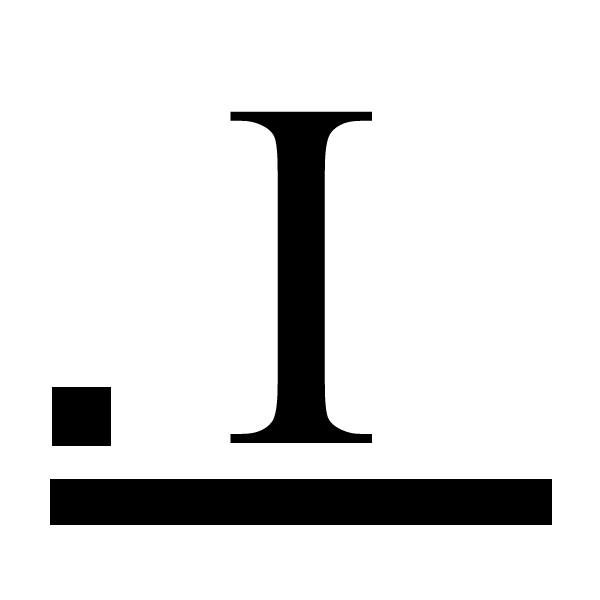
<style>
.page{position:relative;width:600px;height:600px;background:#ffffff}
.page>*{position:absolute;margin:0}
.t1{font:500px "TimesNewRomanPSMT";color:#000000}
</style>
<div class="page">
<p class="t1" style="left:230px;top:111px;width:142px;height:332px">I</p>
</div>
